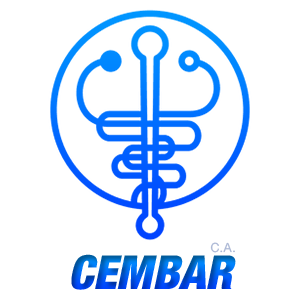
<style>
.page{position:relative;width:300px;height:300px;background:#ffffff}
.page>*{position:absolute;margin:0}
.t1{font:12.7px "HelveticaNowText-Regular";color:#acb8d5}
.t2{font:47px "HelveticaNeueLTW06-97BlkCnObl"}
</style>
<div class="page">
<p class="t1" style="left:210px;top:242px;width:25px;height:11px">C.A.</p>
<p class="t2" style="left:71px;top:254px;width:165px;height:36px">CEMBAR</p>
</div>
